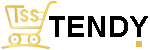
<style>
.page{position:relative;width:150px;height:50px;background:#ffffff}
.page>*{position:absolute;margin:0}
.t1{font:28.6px "Arial-BoldMT";color:#000000;text-transform:uppercase}
</style>
<div class="page">
<p class="t1" style="left:49px;top:16px;width:99px;height:21px">tendy</p>
</div>
